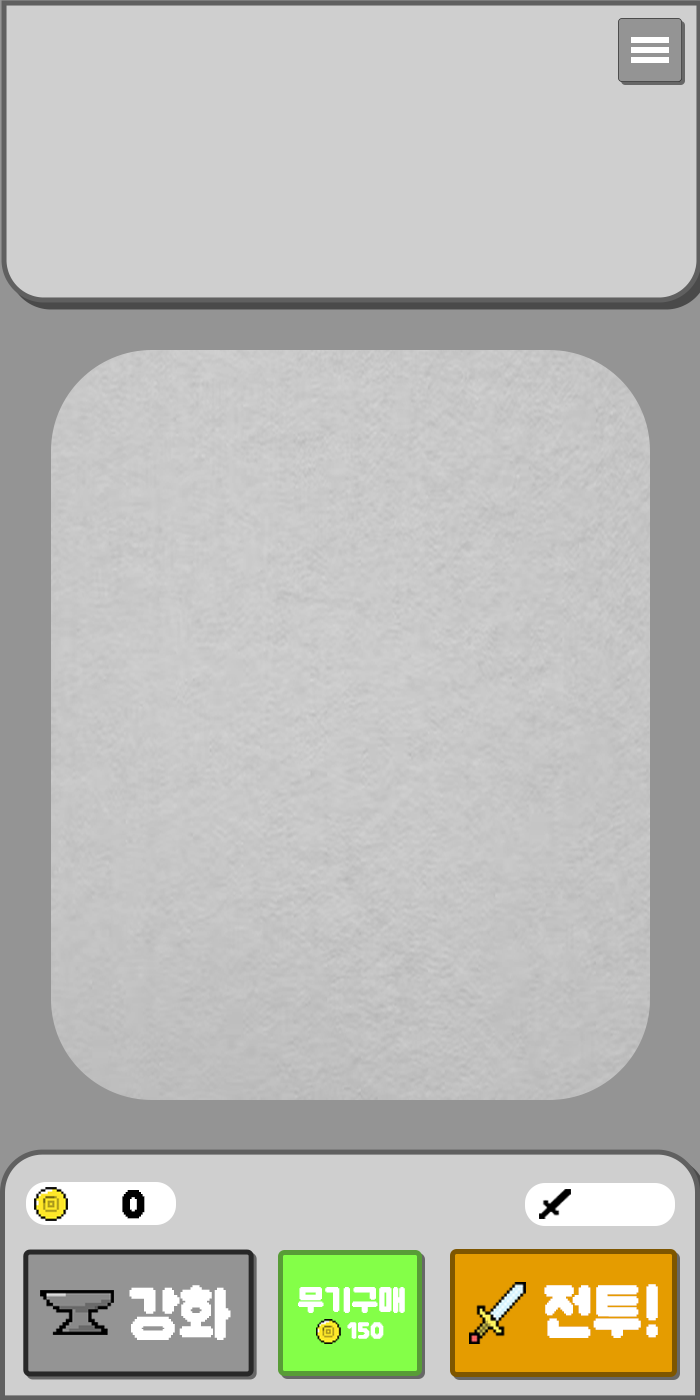
<style>
.page{position:relative;width:700px;height:1400px;background:#cfcfcf}
.page>*{position:absolute;margin:0}
.t1{font:39.3px "DNFBitBitOTF";letter-spacing:-0.02em;color:#000000}
.t2{font:69.7px "DNFBitBitOTF";letter-spacing:-0.02em;color:#ffffff;scale:0.92 1}
.t3{font:34.6px "DNFBitBitOTF";letter-spacing:-0.02em;color:#ffffff}
.t4{font:70.3px "DNFBitBitOTF";letter-spacing:-0.02em;color:#ffffff;scale:0.9 1}
.t5{font:22.6px "DNFBitBitOTF";letter-spacing:-0.02em;color:#ffffff}
</style>
<div class="page">
<p class="t1" style="left:122px;top:1190px;width:23px;height:29px">0</p>
<p class="t2" style="left:129px;top:1285px;width:102px;height:55px">강화</p>
<p class="t3" style="left:298px;top:1287px;width:107px;height:26px">무기구매</p>
<p class="t4" style="left:544px;top:1284px;width:114px;height:54px">전투!</p>
<p class="t5" style="left:347px;top:1322px;width:37px;height:17px">150</p>
</div>
